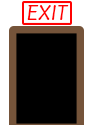
<style>
.page{position:relative;width:90px;height:125px;background:#000000}
.page>*{position:absolute;margin:0}
.t1{font:18.3px "AnnaiMN-Regular";letter-spacing:0.01em;color:#ff0000}
</style>
<div class="page">
<p class="t1" style="left:27px;top:5px;width:42px;height:15px">EXIT</p>
</div>
